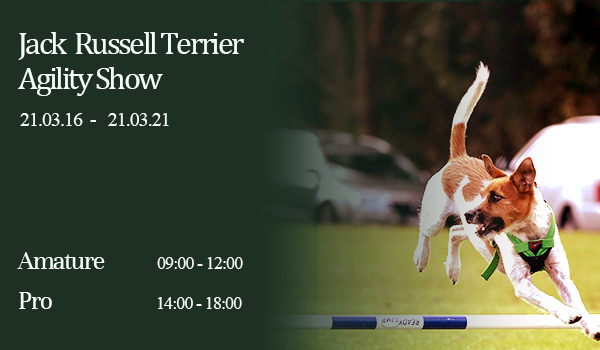
<style>
.page{position:relative;width:600px;height:350px;background:#1e3024}
.page>*{position:absolute;margin:0}
.t1{font:32px/35px "Cambria";letter-spacing:-0.075em;color:#f6fff9}
.t2{font:20px "TimesNewRomanPSMT";letter-spacing:-0.05em;color:#f6fff9}
.t3{font:27px/40px "Unna-Regular";letter-spacing:-0.05em;color:#f6fff9}
.t4{font:18px "TimesNewRomanPSMT";letter-spacing:-0.05em;color:#f6fff9}
</style>
<div class="page">
<p class="t1" style="left:18px;top:32px;width:226px;height:64px">Jack  Russell Terrier<br>Agility Show</p>
<p class="t2" style="left:20px;top:113px;width:149px;height:13px">21.03.16  -   21.03.21</p>
<p class="t3" style="left:17px;top:252px;width:88px;height:57px">Amature<br>Pro</p>
<p class="t4" style="left:157px;top:257px;width:86px;height:12px">09:00 - 12:00</p>
<p class="t4" style="left:158px;top:297px;width:84px;height:12px">14:00 - 18:00</p>
</div>
